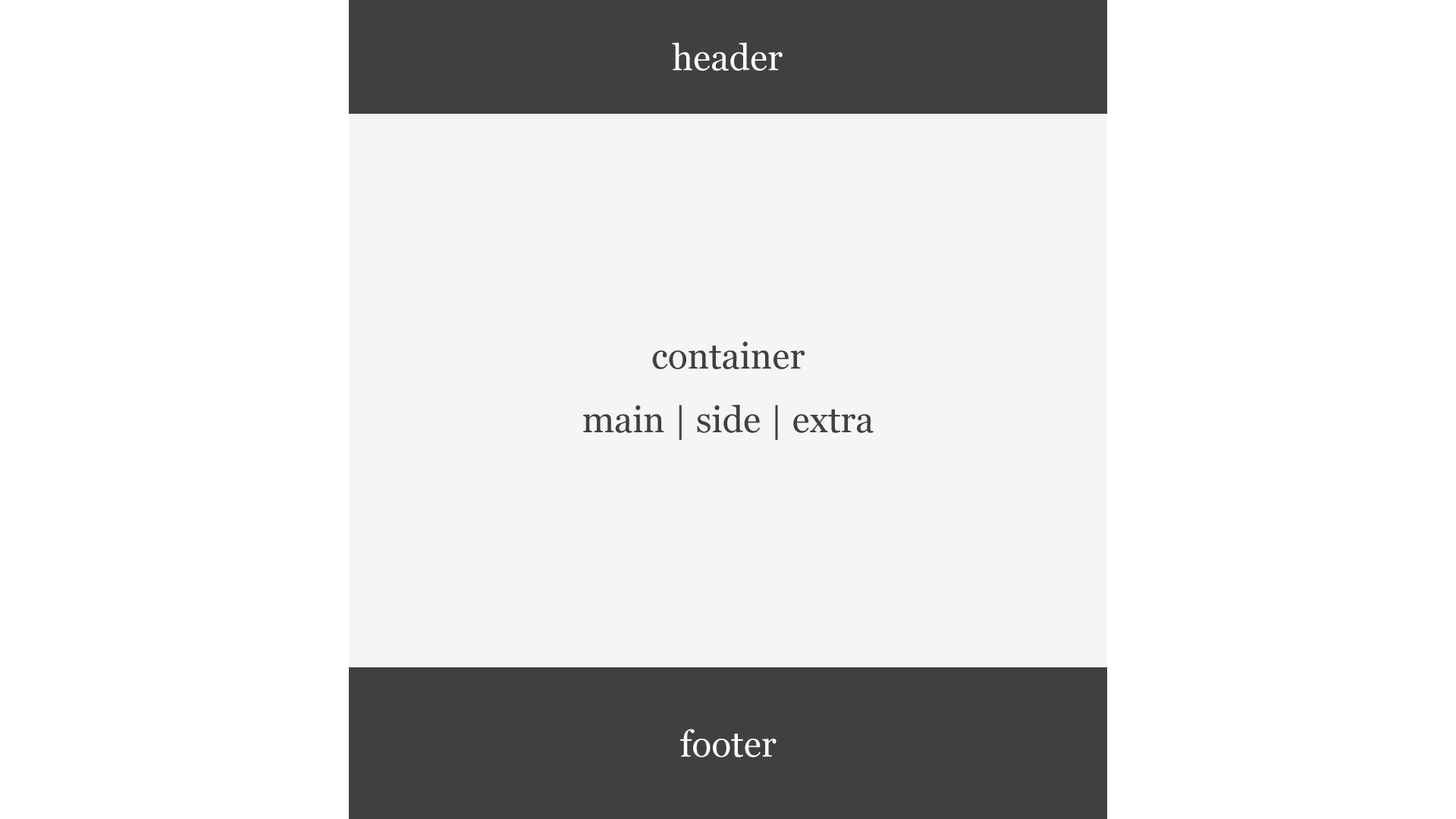
<style>
.page{position:relative;width:1456px;height:819px;background:#ffffff}
.page>*{position:absolute;margin:0}
.t1{font:36.4px "Georgia";color:#fafbfb}
.t2{font:36.4px "Georgia";color:#404040}
.t3{font:36.4px "Georgia";color:#fafafa}
</style>
<div class="page">
<p class="t1" style="left:672px;top:42px;width:111px;height:29px">header</p>
<p class="t2" style="left:583px;top:341px;width:291px;height:99px;text-align:center">container<br>main | side | extra</p>
<p class="t3" style="left:680px;top:729px;width:97px;height:29px">footer</p>
</div>
